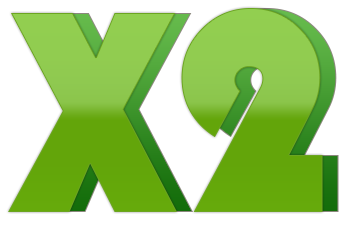
<style>
.page{position:relative;width:342px;height:228px;background:#ffffff}
.page>*{position:absolute;margin:0}
.t1{font:299.2px "Bauhaus93"}
</style>
<div class="page">
<p class="t1" style="left:8px;top:8px;width:315px;height:204px">X2</p>
<p class="t1" style="left:24px;top:8px;width:315px;height:204px">X2</p>
</div>
